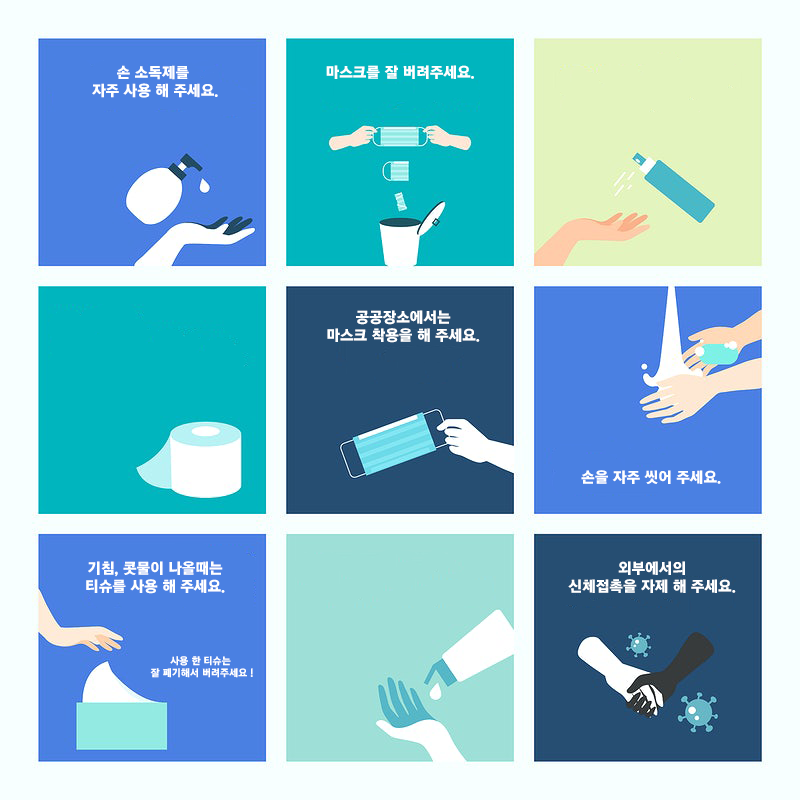
<style>
.page{position:relative;width:800px;height:800px}
.page>*{position:absolute;margin:0}
.t1{font:15px "KoreanGD19-R";color:#ffffff;scale:1.03 1}
.t2{font:10px "KoreanGD19-R";color:#ffffff;scale:1.03 1}
</style>
<div class="page">
<p class="t1" style="left:92px;top:65px;width:126px;height:33px;text-align:center">손 소독제를 <br>자주 사용 해 주세요.</p>
<p class="t1" style="left:326px;top:65px;width:148px;height:14px">마스크를 잘 버려주세요.</p>
<p class="t1" style="left:327px;top:310px;width:153px;height:33px;text-align:center">공공장소에서는<br>마스크 착용을 해 주세요.</p>
<p class="t1" style="left:581px;top:470px;width:140px;height:14px">손을 자주 씻어 주세요.</p>
<p class="t1" style="left:86px;top:561px;width:139px;height:33px;text-align:center">기침, 콧물이 나올때는<br>티슈를 사용 해 주세요.</p>
<p class="t1" style="left:568px;top:561px;width:168px;height:32px;text-align:center">외부에서의<br>신체접촉을 자제 해 주세요.</p>
<p class="t2" style="left:150px;top:656px;width:103px;height:22px;text-align:center">사용 한 티슈는 <br>잘 폐기해서 버려주세요 !</p>
</div>
